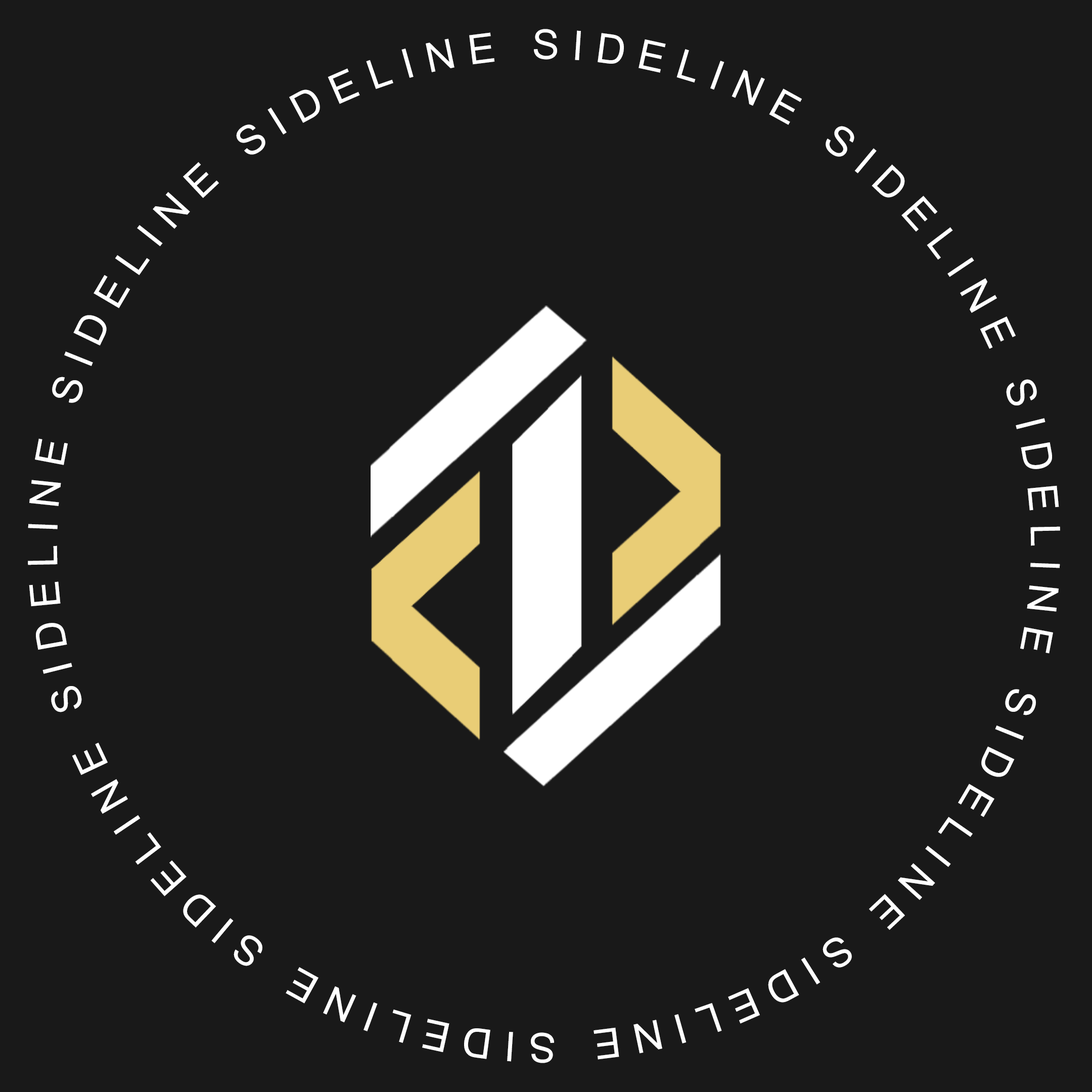
<style>
.page{position:relative;width:1092px;height:1092px;background:#191919}
.page>*{position:absolute;margin:0}
.t1{font:40.9px "ArialMT";letter-spacing:0.294em;color:#ffffff}
</style>
<div class="page">
<p class="t1" style="left:28px;top:29px;width:1032px;height:1034px">SIDELINE SIDELINE SIDELINE SIDELINE SIDELINE SIDELINE SIDELINE SIDELINE SIDELINE SIDELINE SIDELINE SIDELINE SIDELINE SIDELINE SIDELINE SIDELINE SIDELINE SIDELINE SIDELINE SIDELINE SIDELINE SIDELINE SIDELINE SIDELINE SIDELINE</p>
</div>
